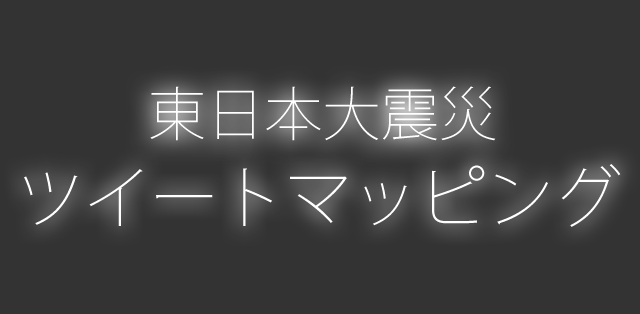
<style>
.page{position:relative;width:640px;height:314px;background:#333333}
.page>*{position:absolute;margin:0}
.t1{font:58.3px "KozGoPr6N-ExtraLight";color:#ffffff}
.t2{font:67.1px "KozGoPr6N-ExtraLight";color:#ffffff}
</style>
<div class="page">
<p class="t1" style="left:150px;top:86px;width:346px;height:55px">東日本大震災</p>
<p class="t2" style="left:24px;top:164px;width:597px;height:63px">ツイートマッピング</p>
</div>
